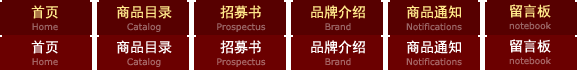
<style>
.page{position:relative;width:577px;height:70px;background:#6b0000}
.page>*{position:absolute;margin:0}
.t1{font:14px "SimHei";color:#ffe88a}
.t2{font:9px "Verdana";color:#9a6666}
.t3{font:14px "SimHei";color:#fefefe}
.t4{font:14px "SimHei";color:#ffffff}
.t5{font:9px "Verdana";color:#a66666}
</style>
<div class="page">
<p class="t1" style="left:31px;top:5px;width:27px;height:14px">首页</p>
<p class="t1" style="left:117px;top:5px;width:55px;height:14px">商品目录</p>
<p class="t1" style="left:220px;top:5px;width:41px;height:14px">招募书</p>
<p class="t1" style="left:311px;top:5px;width:54px;height:14px">品牌介绍</p>
<p class="t1" style="left:407px;top:5px;width:54px;height:14px">商品通知</p>
<p class="t1" style="left:510px;top:4px;width:41px;height:14px">留言板</p>
<p class="t2" style="left:32px;top:23px;width:26px;height:8px">Home</p>
<p class="t2" style="left:127px;top:23px;width:34px;height:9px">Catalog</p>
<p class="t2" style="left:217px;top:23px;width:49px;height:9px">Prospectus</p>
<p class="t2" style="left:325px;top:23px;width:26px;height:8px">Brand</p>
<p class="t2" style="left:406px;top:23px;width:56px;height:8px">Notifications</p>
<p class="t2" style="left:509px;top:22px;width:42px;height:8px">notebook</p>
<p class="t3" style="left:31px;top:40px;width:27px;height:14px">首页</p>
<p class="t4" style="left:117px;top:40px;width:55px;height:14px">商品目录</p>
<p class="t4" style="left:220px;top:40px;width:41px;height:14px">招募书</p>
<p class="t4" style="left:311px;top:40px;width:54px;height:14px">品牌介绍</p>
<p class="t4" style="left:407px;top:40px;width:54px;height:14px">商品通知</p>
<p class="t4" style="left:510px;top:39px;width:41px;height:14px">留言板</p>
<p class="t5" style="left:32px;top:58px;width:26px;height:8px">Home</p>
<p class="t5" style="left:127px;top:58px;width:34px;height:9px">Catalog</p>
<p class="t5" style="left:217px;top:58px;width:49px;height:9px">Prospectus</p>
<p class="t5" style="left:325px;top:58px;width:26px;height:8px">Brand</p>
<p class="t5" style="left:406px;top:58px;width:56px;height:8px">Notifications</p>
<p class="t5" style="left:509px;top:57px;width:42px;height:8px">notebook</p>
</div>
